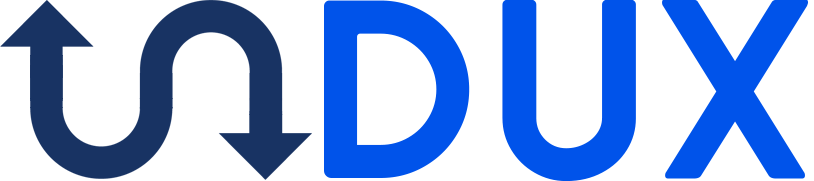
<style>
.page{position:relative;width:814px;height:181px;background:#ffffff}
.page>*{position:absolute;margin:0}
.t1{font:256px "LEIXO-DEMO";color:#0053ea}
</style>
<div class="page">
<p class="t1" style="left:324px;top:0px;width:484px;height:182px">dux</p>
</div>
